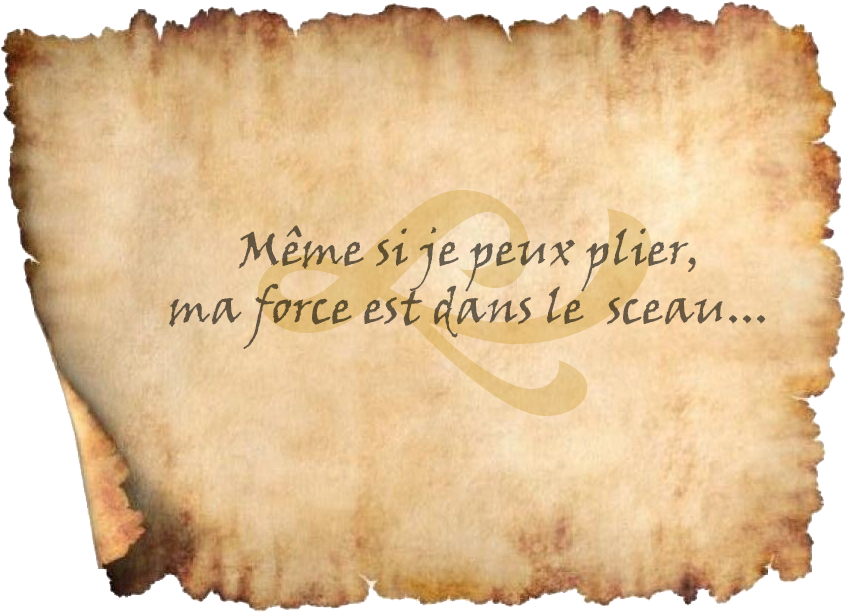
<style>
.page{position:relative;width:846px;height:612px}
.page>*{position:absolute;margin:0}
.t1{font:48px "VinerHandITC";color:#645642}
</style>
<div class="page">
<p class="t1" style="left:169px;top:225px;width:597px;height:124px;text-align:center">Même si je peux plier,<br>ma force est dans le  sceau...</p>
</div>
